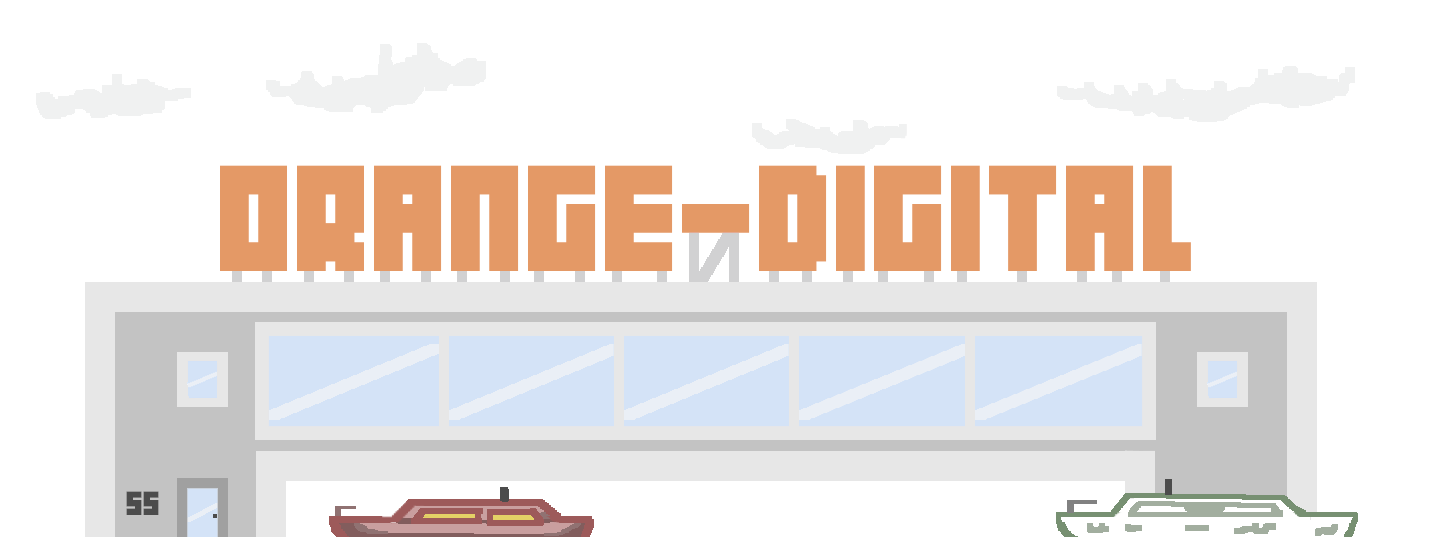
<style>
.page{position:relative;width:1451px;height:537px;background:#ffffff}
.page>*{position:absolute;margin:0}
.t1{font:134px "04b19";color:#e49966}
.t2{font:30px "04b19";color:#4c4c4c}
</style>
<div class="page">
<p class="t1" style="left:220px;top:165px;width:971px;height:106px">ORANGE-DIGITAL</p>
<p class="t2" style="left:126px;top:491px;width:33px;height:24px">55</p>
</div>
